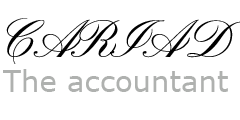
<style>
.page{position:relative;width:240px;height:120px;background:#ffffff}
.page>*{position:absolute;margin:0}
.t1{font:29.2px "MSReferenceSansSerif";color:#b0b2b0}
.t2{font:54.2px "PinyonScript";color:#000000}
</style>
<div class="page">
<p class="t1" style="left:3px;top:18px;width:238px;height:74px"><span class="t2"><br>CARIAD<br></span>The accountant</p>
</div>
